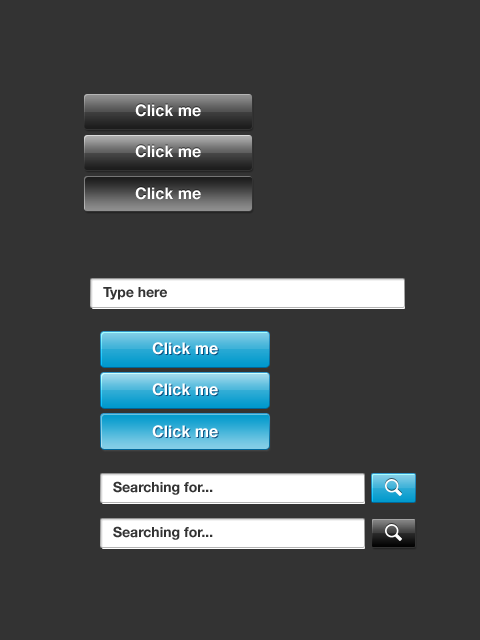
<style>
.page{position:relative;width:480px;height:640px;background:#333333}
.page>*{position:absolute;margin:0}
.t1{font:16px "Helvetica-Bold";color:#ffffff}
.t2{font:14px "HelveticaNeue-Bold";color:#333333}
</style>
<div class="page">
<p class="t1" style="left:135px;top:104px;width:66px;height:13px">Click me</p>
<p class="t1" style="left:135px;top:145px;width:66px;height:13px">Click me</p>
<p class="t1" style="left:135px;top:187px;width:66px;height:13px">Click me</p>
<p class="t2" style="left:103px;top:287px;width:64px;height:13px">Type here</p>
<p class="t1" style="left:152px;top:342px;width:66px;height:13px">Click me</p>
<p class="t1" style="left:152px;top:383px;width:66px;height:13px">Click me</p>
<p class="t1" style="left:152px;top:425px;width:66px;height:13px">Click me</p>
<p class="t2" style="left:113px;top:481px;width:100px;height:14px">Searching for...</p>
<p class="t2" style="left:113px;top:526px;width:100px;height:14px">Searching for...</p>
</div>
